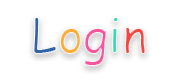
<style>
.page{position:relative;width:182px;height:82px;background:#ffffff}
.page>*{position:absolute;margin:0}
.t1{font:48px "ComicSansMS"}
</style>
<div class="page">
<p class="t1" style="left:33px;top:17px;width:113px;height:49px">Login</p>
</div>
